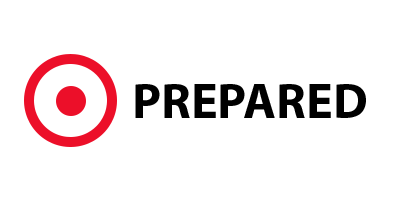
<style>
.page{position:relative;width:402px;height:200px;background:#ffffff}
.page>*{position:absolute;margin:0}
.t1{font:50px "MyriadPro-Bold";color:#000000}
</style>
<div class="page">
<p class="t1" style="left:135px;top:84px;width:231px;height:34px">PREPARED</p>
</div>
